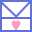
<style>
.page{position:relative;width:32px;height:32px;background:#ffffff}
.page>*{position:absolute;margin:0}
.t1{font:12.7px "Gulim";color:#ff9ab9;font-variant:small-caps}
</style>
<div class="page">
<p class="t1" style="left:11px;top:20px;width:10px;height:10px">♥</p>
</div>
